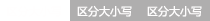
<style>
.page{position:relative;width:210px;height:21px;background:#afaeae}
.page>*{position:absolute;margin:0}
.t1{font:11px "MicrosoftYaHei";color:#fffefe}
</style>
<div class="page">
<p class="t1" style="left:77px;top:5px;width:55px;height:12px">区分大小写</p>
<p class="t1" style="left:147px;top:5px;width:55px;height:12px">区分大小写</p>
</div>
